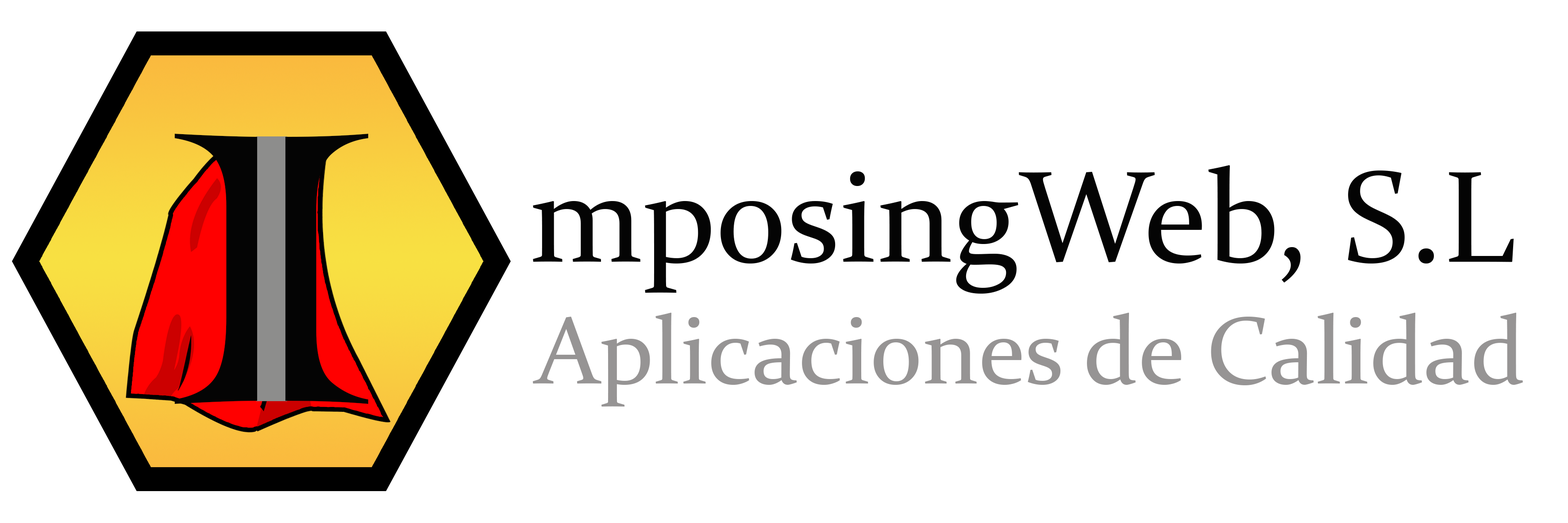
<style>
.page{position:relative;width:1568px;height:523px;background:#ffffff}
.page>*{position:absolute;margin:0}
.t1{font:130.9px "Constantia";color:#040404}
.t2{font:96.4px "Constantia";color:#969494}
</style>
<div class="page">
<p class="t1" style="left:533px;top:165px;width:981px;height:128px">mposingWeb, S.L</p>
<p class="t2" style="left:532px;top:312px;width:991px;height:94px">Aplicaciones de Calidad</p>
</div>
